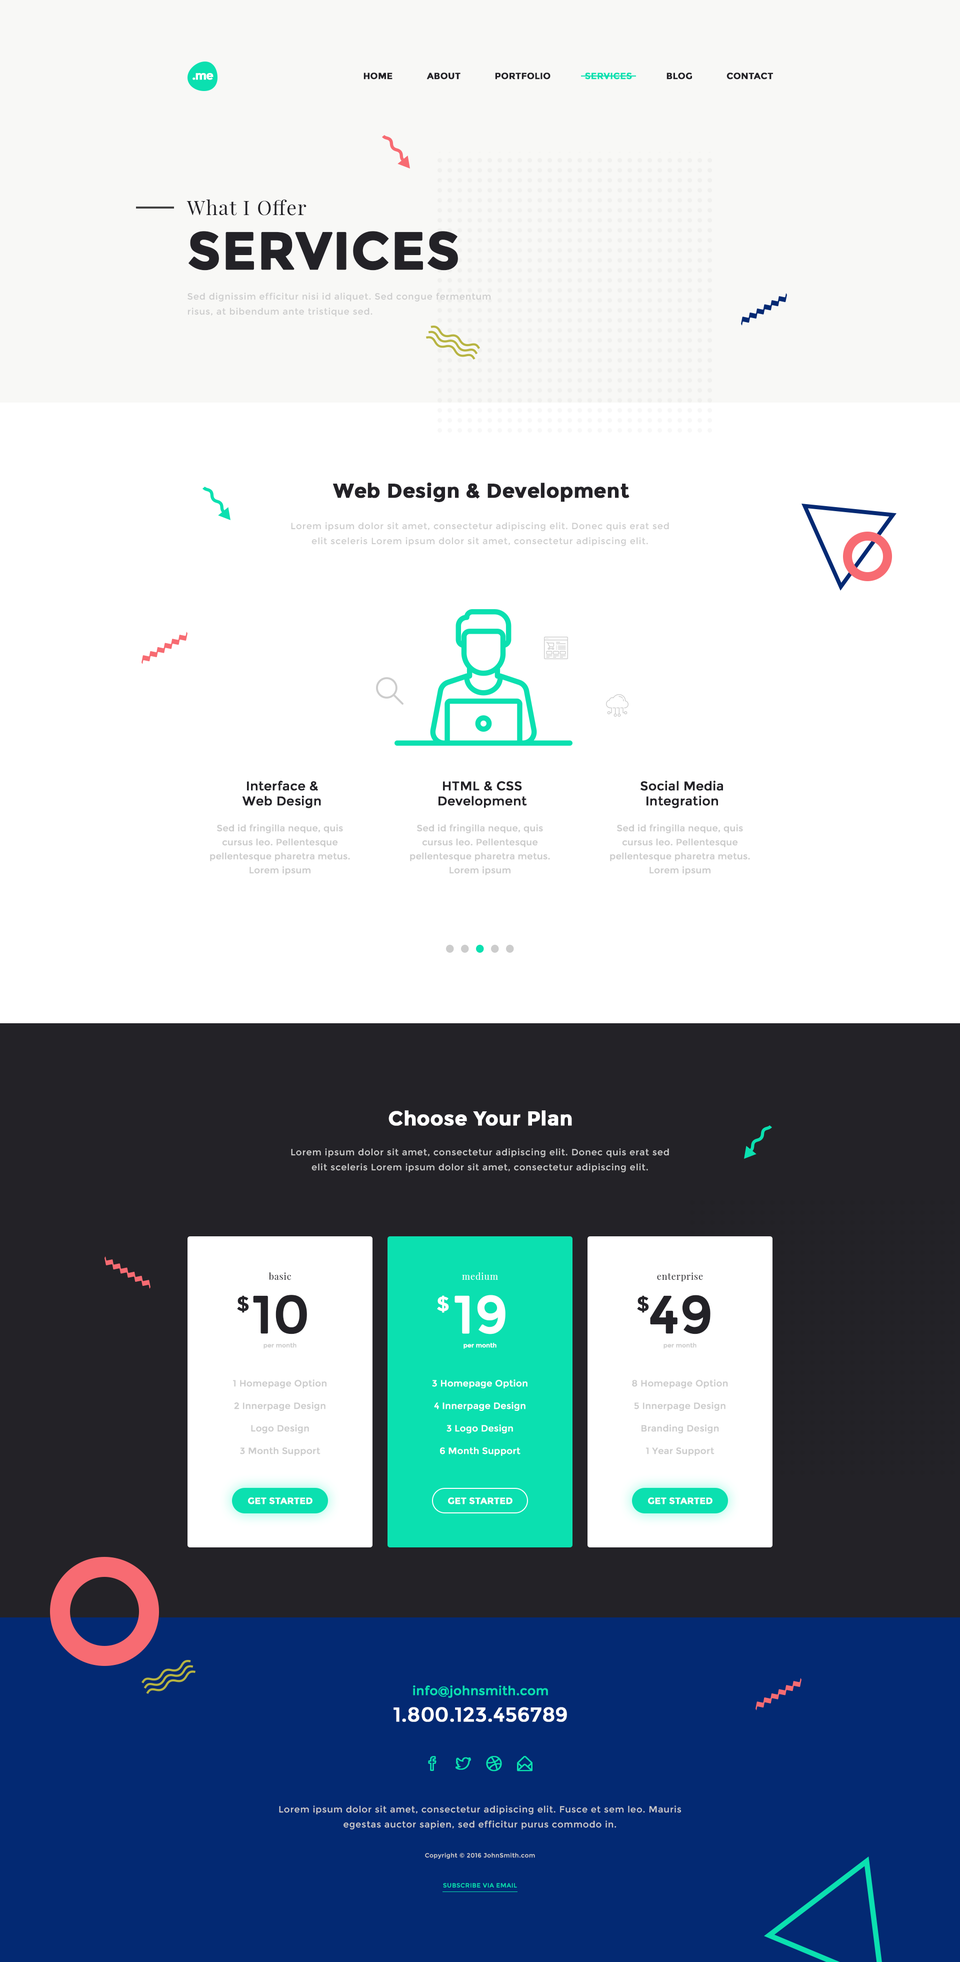
<style>
.page{position:relative;width:960px;height:1962px;background:#ffffff}
.page>*{position:absolute;margin:0}
.t1{font:11.8px "Montserrat-Bold";letter-spacing:-0.06em;color:#ffffff;font-weight:bold}
.t2{font:9px "Montserrat-Bold";color:#232227;text-transform:uppercase;font-weight:bold}
.t3{font:9px "Montserrat-Bold";color:#0be0b0;text-transform:uppercase;font-weight:bold}
.t4{font:20px "PlayfairDisplay-Regular";letter-spacing:0.05em;color:#232227}
.t5{font:52px "Montserrat-Bold";color:#232227;text-transform:uppercase;font-weight:bold}
.t6{font:9px/15px "Montserrat-Regular";letter-spacing:0.05em;color:#cccccc}
.t7{font:20px "Montserrat-Bold";color:#232227;font-weight:bold}
.t8{font:12.5px "Montserrat-Regular";color:#232227;font-weight:bold}
.t9{font:9px/14px "Montserrat-Regular";color:#cccccc;font-weight:bold}
.t10{font:20px "Montserrat-Bold";color:#ffffff;font-weight:bold}
.t11{font:9px "PlayfairDisplay-Regular";letter-spacing:0.05em;color:#232227}
.t12{font:9px "PlayfairDisplay-Regular";letter-spacing:0.05em;color:#ffffff}
.t13{font:20px "Montserrat-Regular";color:#232227;font-weight:bold}
.t14{font:52px "Montserrat-Regular";color:#232227;font-weight:bold}
.t15{font:20px "Montserrat-Regular";color:#ffffff;font-weight:bold}
.t16{font:52px "Montserrat-Regular";color:#ffffff;font-weight:bold}
.t17{font:6px "Montserrat-Regular";color:#cccccc;font-weight:bold}
.t18{font:6px "Montserrat-Regular";color:#ffffff;font-weight:bold}
.t19{font:9px/22.5px "Montserrat-Regular";color:#cccccc;font-weight:bold}
.t20{font:9px/22.5px "Montserrat-Regular";color:#ffffff;font-weight:bold}
.t21{font:9px "Montserrat-Bold";color:#ffffff;text-transform:uppercase;font-weight:bold}
.t22{font:12.5px/26.5px "Montserrat-Regular";color:#0be0b0;font-weight:bold}
.t23{font:20px/26.5px "Montserrat-Regular";color:#ffffff;font-weight:bold}
.t24{font:6px/15px "Montserrat-Regular";letter-spacing:0.05em;color:#cccccc}
.t25{font:6px/15px "Montserrat-Regular";letter-spacing:0.05em;color:#0be0b0}
</style>
<div class="page">
<p class="t1" style="left:192px;top:73px;width:22px;height:7px">.me</p>
<p class="t2" style="left:364px;top:72px;width:409px;height:8px">HOME             ABOUT             PORTFOLIO             <span class="t3">SERVICES   </span>          BLOG             CONTACT</p>
<p class="t4" style="left:186px;top:199px;width:120px;height:17px">What I Offer</p>
<p class="t5" style="left:188px;top:231px;width:270px;height:39px">services</p>
<p class="t6" style="left:188px;top:292px;width:303px;height:24px">Sed dignissim efficitur nisi id aliquet. Sed congue fermentum risus, at bibendum ante tristique sed.</p>
<p class="t7" style="left:333px;top:482px;width:297px;height:20px">Web Design &amp; Development</p>
<p class="t6" style="left:291px;top:522px;width:378px;height:24px;text-align:center">Lorem ipsum dolor sit amet, consectetur adipiscing elit. Donec quis erat sed elit sceleris Lorem ipsum dolor sit amet, consectetur adipiscing elit.</p>
<p class="t8" style="left:242px;top:780px;width:79px;height:28px;text-align:center">Interface &amp;<br>Web Design</p>
<p class="t8" style="left:438px;top:781px;width:89px;height:27px;text-align:center">HTML &amp; CSS<br>Development</p>
<p class="t8" style="left:640px;top:780px;width:83px;height:28px;text-align:center">Social Media<br>Integration</p>
<p class="t9" style="left:210px;top:824px;width:140px;height:51px;text-align:center">Sed id fringilla neque, quis cursus leo. Pellentesque pellentesque pharetra metus. Lorem ipsum</p>
<p class="t9" style="left:410px;top:824px;width:140px;height:51px;text-align:center">Sed id fringilla neque, quis cursus leo. Pellentesque pellentesque pharetra metus. Lorem ipsum</p>
<p class="t9" style="left:610px;top:824px;width:140px;height:51px;text-align:center">Sed id fringilla neque, quis cursus leo. Pellentesque pellentesque pharetra metus. Lorem ipsum</p>
<p class="t10" style="left:388px;top:1110px;width:184px;height:16px">Choose Your Plan</p>
<p class="t6" style="left:291px;top:1148px;width:378px;height:24px;text-align:center">Lorem ipsum dolor sit amet, consectetur adipiscing elit. Donec quis erat sed elit sceleris Lorem ipsum dolor sit amet, consectetur adipiscing elit.</p>
<p class="t11" style="left:268px;top:1272px;width:23px;height:8px">basic</p>
<p class="t12" style="left:462px;top:1272px;width:36px;height:8px">medium</p>
<p class="t11" style="left:657px;top:1272px;width:46px;height:9px">enterprise</p>
<p class="t13" style="left:237px;top:1295px;width:12px;height:17px">$</p>
<p class="t14" style="left:253px;top:1294px;width:54px;height:40px">10</p>
<p class="t15" style="left:437px;top:1295px;width:12px;height:17px">$</p>
<p class="t16" style="left:454px;top:1294px;width:52px;height:40px">19</p>
<p class="t13" style="left:637px;top:1295px;width:12px;height:17px">$</p>
<p class="t14" style="left:650px;top:1294px;width:60px;height:40px">49</p>
<p class="t17" style="left:264px;top:1342px;width:32px;height:6px">per month</p>
<p class="t18" style="left:464px;top:1342px;width:32px;height:6px">per month</p>
<p class="t17" style="left:664px;top:1342px;width:32px;height:6px">per month</p>
<p class="t19" style="left:233px;top:1379px;width:93px;height:77px;text-align:center">1 Homepage Option<br>2 Innerpage Design<br>Logo Design<br>3 Month Support</p>
<p class="t20" style="left:432px;top:1379px;width:96px;height:77px;text-align:center">3 Homepage Option<br>4 Innerpage Design<br>3 Logo Design<br>6 Month Support</p>
<p class="t19" style="left:632px;top:1379px;width:96px;height:77px;text-align:center">8 Homepage Option<br>5 Innerpage Design<br>Branding Design<br>1 Year Support</p>
<p class="t21" style="left:248px;top:1497px;width:64px;height:7px">get started</p>
<p class="t21" style="left:448px;top:1497px;width:64px;height:7px">get started</p>
<p class="t21" style="left:648px;top:1497px;width:64px;height:7px">get started</p>
<p class="t22" style="left:394px;top:1685px;width:173px;height:37px;text-align:center">info@johnsmith.com<br><span class="t23">1.800.123.456789</span></p>
<p class="t6" style="left:279px;top:1805px;width:403px;height:83px;text-align:center">Lorem ipsum dolor sit amet, consectetur adipiscing elit. Fusce et sem leo. Mauris egestas auctor sapien, sed efficitur purus commodo in. <br><br><span class="t24">Copyright © 2016 JohnSmith.com<br><br></span><span class="t25">SUBSCRIBE VIA EMAIL</span></p>
</div>
